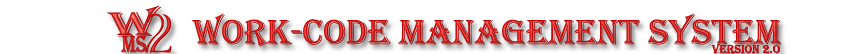
<style>
.page{position:relative;width:864px;height:54px;background:#ffffff}
.page>*{position:absolute;margin:0}
.t1{font:35.8px "Algerian";color:#ecb1b7;scale:1.67 1}
.t2{font:57.8px "VivaStd-Regular";color:#ecb1b7;scale:0.93 1}
.t3{font:36px "Algerian";color:#ecb1b7}
.t4{font:24px "Algerian";color:#ecb1b7;scale:0.8 1}
.t5{font:12px "Algerian";color:#ecb1b7}
</style>
<div class="page">
<p class="t1" style="left:107px;top:5px;width:54px;height:32px;rotate:-1deg">W</p>
<p class="t2" style="left:145px;top:13px;width:27px;height:40px">2</p>
<p class="t3" style="left:191px;top:13px;width:591px;height:34px">WORK-CODE MANAGEMENT SYSTEM</p>
<p class="t4" style="left:121px;top:35px;width:26px;height:18px">MS</p>
<p class="t5" style="left:711px;top:43px;width:69px;height:11px">version 2.o</p>
</div>
